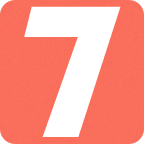
<style>
.page{position:relative;width:144px;height:144px;background:#ffffff}
.page>*{position:absolute;margin:0}
.t1{font:191px "Mouser";letter-spacing:0.025em;color:#ffffff}
</style>
<div class="page">
<p class="t1" style="left:24px;top:6px;width:97px;height:131px">7</p>
</div>
